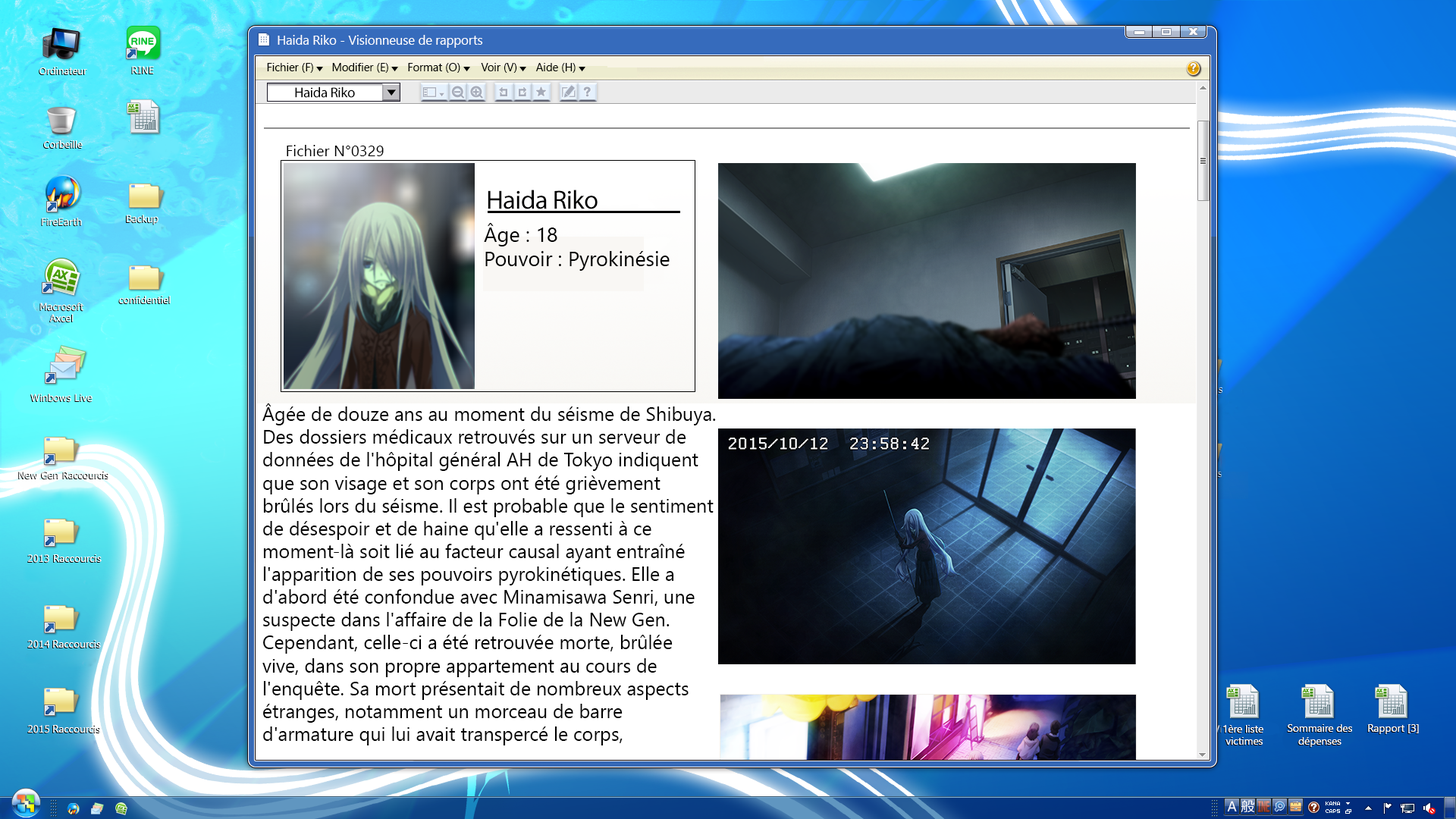
<style>
.page{position:relative;width:1456px;height:819px}
.page>*{position:absolute;margin:0}
.t1{font:12.6px "SegoeUIHistoric";color:#ffffff}
.t2{font:11.1px "SegoeUIHistoric";color:#000000}
.t3{font:10px "SegoeUIHistoric";color:#ffffff}
.t4{font:15.4px "SegoeUIHistoric";color:#000000}
.t5{font:20.5px "SegoeUIHistoric";color:#000000}
.t6{font:19px "SegoeUIHistoric";color:#000000}
.t7{font:10.4px "SegoeUIHistoric";color:#ffffff}
</style>
<div class="page">
<p class="t1" style="left:278px;top:35px;width:205px;height:13px">Haida Riko - Visionneuse de rapports</p>
<p class="t2" style="left:267px;top:63px;width:46px;height:10px">Fichier (F)</p>
<p class="t2" style="left:332px;top:63px;width:56px;height:10px">Modifier (E)</p>
<p class="t2" style="left:408px;top:63px;width:52px;height:10px">Format (O)</p>
<p class="t2" style="left:481px;top:63px;width:36px;height:10px">Voir (V)</p>
<p class="t2" style="left:535px;top:63px;width:41px;height:10px">Aide (H)</p>
<p class="t3" style="left:39px;top:67px;width:48px;height:7px">Ordinateur</p>
<p class="t3" style="left:44px;top:140px;width:39px;height:8px">Corbeille</p>
<p class="t4" style="left:287px;top:145px;width:97px;height:11px">Fichier N°0329</p>
<p class="t5" style="left:484px;top:223px;width:186px;height:48px">Âge : 18<br>Pouvoir : Pyrokinésie</p>
<p class="t3" style="left:119px;top:296px;width:52px;height:7px">confidentiel</p>
<p class="t6" style="left:262px;top:403px;width:454px;height:342px">Âgée de douze ans au moment du séisme de Shibuya. <br>Des dossiers médicaux retrouvés sur un serveur de <br>données de l'hôpital général AH de Tokyo indiquent <br>que son visage et son corps ont été grièvement<br>brûlés lors du séisme. Il est probable que le sentiment<br>de désespoir et de haine qu'elle a ressenti à ce <br>moment-là soit lié au facteur causal ayant entraîné<br>l'apparition de ses pouvoirs pyrokinétiques. Elle a <br>d'abord été confondue avec Minamisawa Senri, une<br>suspecte dans l'affaire de la Folie de la New Gen. <br>Cependant, celle-ci a été retrouvée morte, brûlée <br>vive, dans son propre appartement au cours de <br>l'enquête. Sa mort présentait de nombreux aspects <br>étranges, notamment un morceau de barre <br>d'armature qui lui avait transpercé le corps,</p>
<p class="t7" style="left:54px;top:554px;width:48px;height:8px">Raccourcis</p>
<p class="t7" style="left:53px;top:640px;width:48px;height:8px">Raccourcis</p>
<p class="t7" style="left:53px;top:725px;width:48px;height:8px">Raccourcis</p>
<p class="t7" style="left:1223px;top:725px;width:40px;height:20px;text-align:center">1ère liste <br>victimes</p>
<p class="t7" style="left:1288px;top:724px;width:64px;height:23px;text-align:center">Sommaire des<br>dépenses</p>
<p class="t7" style="left:1368px;top:724px;width:51px;height:10px">Rapport [3]</p>
</div>
